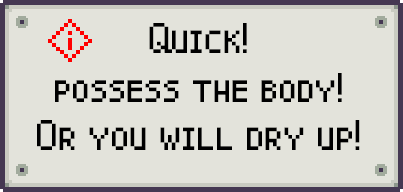
<style>
.page{position:relative;width:403px;height:192px;background:#e3e3db}
.page>*{position:absolute;margin:0}
.t1{font:30px/48.7px "Pixel-Caps";color:#000000}
.t2{font:29px/48.7px "Pixel-Caps";color:#000000}
</style>
<div class="page">
<p class="t1" style="left:37px;top:23px;width:323px;height:127px;text-align:center">Quick!<br><span class="t2">possess the body!<br></span>Or you will dry up!</p>
</div>
